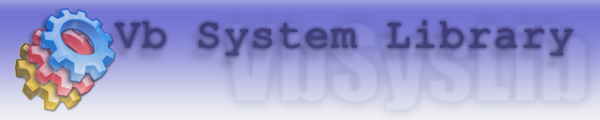
<style>
.page{position:relative;width:600px;height:120px}
.page>*{position:absolute;margin:0}
.t1{font:41px "CourierNewPSMT";color:#41407a;font-weight:bold;scale:1.05 1}
</style>
<div class="page">
<p class="t1" style="left:114px;top:20px;width:459px;height:36px">Vb System Library</p>
</div>
